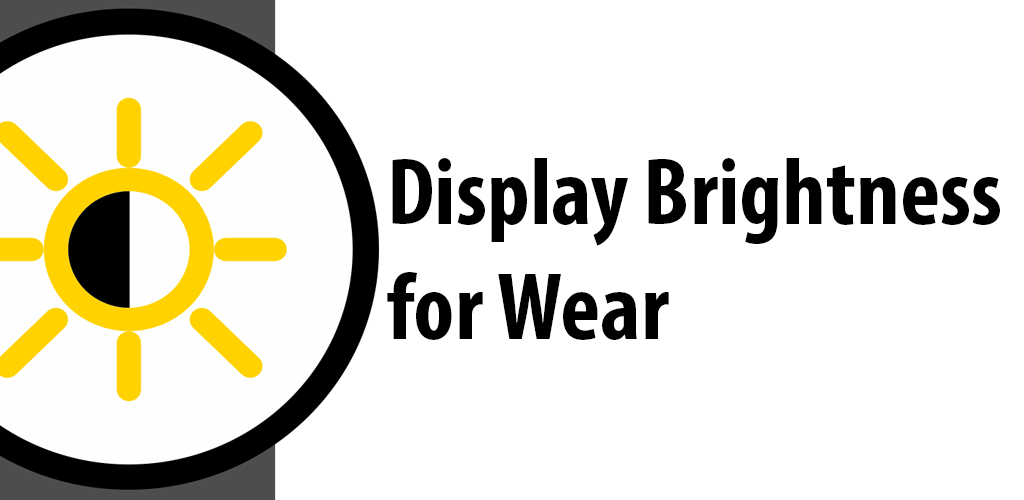
<style>
.page{position:relative;width:1024px;height:500px;background:#ffffff}
.page>*{position:absolute;margin:0}
.t1{font:96px "MyriadPro-BoldCond";color:#000000}
</style>
<div class="page">
<p class="t1" style="left:387px;top:158px;width:613px;height:182px">Display Brightness<br>for Wear</p>
</div>
